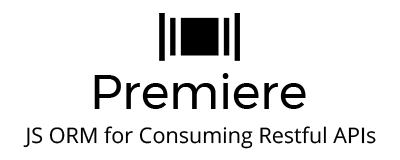
<style>
.page{position:relative;width:400px;height:160px;background:#ffffff}
.page>*{position:absolute;margin:0}
.t1{font:48px "Montserrat-Regular";color:#000000}
.t2{font:21.6px "OpenSans-Regular";color:#000000}
</style>
<div class="page">
<p class="t1" style="left:94px;top:73px;width:212px;height:36px">Premiere</p>
<p class="t2" style="left:23px;top:126px;width:353px;height:23px">JS ORM for Consuming Restful APIs</p>
</div>
